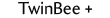
<style>
.page{position:relative;width:110px;height:18px;background:#ffffff}
.page>*{position:absolute;margin:0}
.t1{font:17.3px "Amira-Roman";color:#000000}
</style>
<div class="page">
<p class="t1" style="left:18px;top:1px;width:74px;height:14px;opacity:0.96">TwinBee +</p>
</div>
